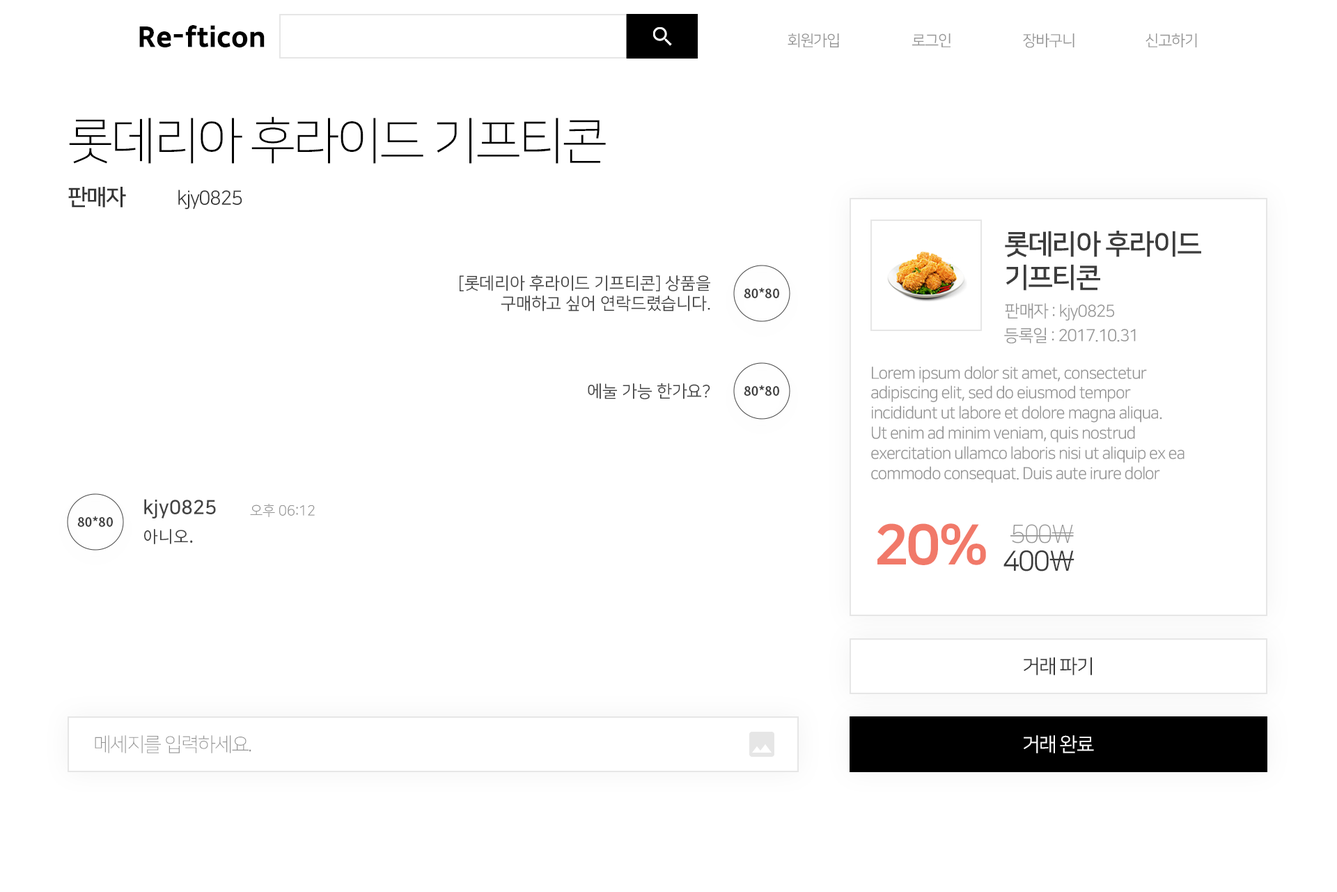
<style>
.page{position:relative;width:1337px;height:892px;background:#ffffff}
.page>*{position:absolute;margin:0}
.t1{font:27.9px "SDGothicNeoc-gExBd";color:#000000}
.t2{font:15.3px "NanumSquareOTFR";letter-spacing:-0.05em;color:#959595}
.t3{font:50.2px "NanumSquareOTFL";letter-spacing:-0.05em;color:#000000}
.t4{font:22.3px "NanumSquareOTFB";letter-spacing:-0.05em;color:#353535}
.t5{font:19.5px "NanumSquareOTFR";letter-spacing:-0.05em;color:#353535}
.t6{font:27.9px "NanumSquareOTFB";letter-spacing:-0.05em;color:#3c3c3c}
.t7{font:16.7px "NanumSquareOTFR";color:#424242}
.t8{font:12.5px "NotoSansCJKkr-Bold";color:#424242}
.t9{font:16.7px "NanumSquareOTFR";letter-spacing:-0.05em;color:#959595}
.t10{font:19.5px "NanumSquareOTFB";color:#424242}
.t11{font:13.9px "NanumSquareOTFL";color:#959595}
.t12{font:16.7px "NotoSansCJKkr-Regular";color:#424242}
.t13{font:55.7px "NanumSquareOTFEB";letter-spacing:-0.05em;color:#f17969}
.t14{font:25.1px "NanumSquareOTFL";letter-spacing:-0.05em;color:#959595}
.t15{font:27.9px "NanumSquareOTFR";letter-spacing:-0.05em;color:#3c3c3c}
.t16{font:19.5px "NanumSquareOTFL";letter-spacing:-0.05em;color:#959595}
.t17{font:19.5px "NanumSquareOTFR";letter-spacing:-0.05em;color:#ffffff}
</style>
<div class="page">
<p class="t1" style="left:139px;top:25px;width:126px;height:23px">Re-fticon</p>
<p class="t2" style="left:788px;top:33px;width:51px;height:14px">회원가입</p>
<p class="t2" style="left:912px;top:33px;width:39px;height:14px">로그인</p>
<p class="t2" style="left:1023px;top:33px;width:52px;height:15px">장바구니</p>
<p class="t2" style="left:1146px;top:33px;width:51px;height:14px">신고하기</p>
<p class="t3" style="left:69px;top:116px;width:537px;height:48px">롯데리아 후라이드 기프티콘</p>
<p class="t4" style="left:68px;top:187px;width:58px;height:21px">판매자</p>
<p class="t5" style="left:178px;top:189px;width:64px;height:20px">kjy0825</p>
<p class="t6" style="left:1005px;top:231px;width:197px;height:59px">롯데리아 후라이드<br>기프티콘</p>
<p class="t7" style="left:460px;top:274px;width:250px;height:37px;text-align:right">[롯데리아 후라이드 기프티콘] 상품을<br>구매하고 싶어 연락드렸습니다.</p>
<p class="t8" style="left:744px;top:288px;width:35px;height:10px">80*80</p>
<p class="t9" style="left:1005px;top:303px;width:110px;height:17px">판매자 : kjy0825</p>
<p class="t9" style="left:1004px;top:327px;width:132px;height:16px">등록일 : 2017.10.31</p>
<p class="t9" style="left:871px;top:366px;width:314px;height:117px">Lorem ipsum dolor sit amet, consectetur<br>adipiscing elit, sed do eiusmod tempor<br>incididunt ut labore et dolore magna aliqua.<br>Ut enim ad minim veniam, quis nostrud<br>exercitation ullamco laboris nisi ut aliquip ex ea<br>commodo consequat. Duis aute irure dolor</p>
<p class="t7" style="left:588px;top:383px;width:122px;height:16px">에눌 가능 한가요?</p>
<p class="t8" style="left:744px;top:385px;width:35px;height:11px">80*80</p>
<p class="t10" style="left:144px;top:499px;width:72px;height:19px">kjy0825</p>
<p class="t11" style="left:250px;top:504px;width:65px;height:13px">오후 06:12</p>
<p class="t8" style="left:77px;top:516px;width:36px;height:11px">80*80</p>
<p class="t12" style="left:144px;top:529px;width:49px;height:15px">아니오.</p>
<p class="t13" style="left:878px;top:523px;width:108px;height:42px">20%</p>
<p class="t14" style="left:1011px;top:524px;width:63px;height:19px">500\</p>
<p class="t15" style="left:1004px;top:550px;width:71px;height:21px">400\</p>
<p class="t5" style="left:1024px;top:657px;width:68px;height:18px">거래 파기</p>
<p class="t16" style="left:95px;top:735px;width:156px;height:18px">메세지를 입력하세요.</p>
<p class="t17" style="left:1024px;top:735px;width:70px;height:18px">거래 완료</p>
</div>
